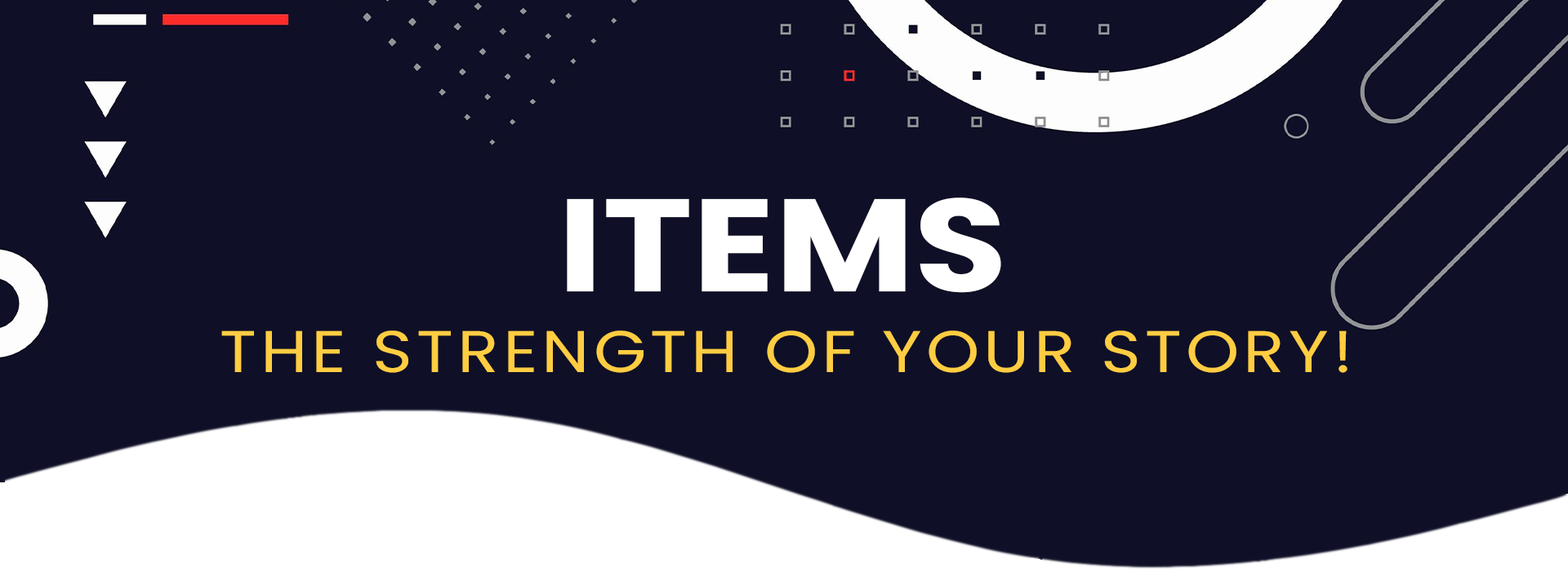
<style>
.page{position:relative;width:1568px;height:581px;background:#0f0f27}
.page>*{position:absolute;margin:0}
.t1{font:131.5px "Poppins-Bold";color:#ffffff;scale:1.16 1}
.t2{font:58.8px "Poppins-Regular";letter-spacing:0.06em;color:#ffcd42;text-transform:uppercase;scale:1.16 1}
</style>
<div class="page">
<p class="t1" style="left:567px;top:198px;width:434px;height:95px">ITEMS</p>
<p class="t2" style="left:221px;top:331px;width:1127px;height:42px">The strength of your story!</p>
</div>
